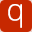
<style>
.page{position:relative;width:32px;height:32px;background:#c72800}
.page>*{position:absolute;margin:0}
.t1{font:30px "OpenSans-Light";color:#ffffff}
</style>
<div class="page">
<p class="t1" style="left:8px;top:4px;width:14px;height:24px">q</p>
</div>
